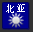
<style>
.page{position:relative;width:33px;height:32px;background:#000090}
.page>*{position:absolute;margin:0}
.t1{font:10.4px "SimSun";color:#ffffff}
</style>
<div class="page">
<p class="t1" style="left:6px;top:4px;width:19px;height:9px">北亚</p>
</div>
